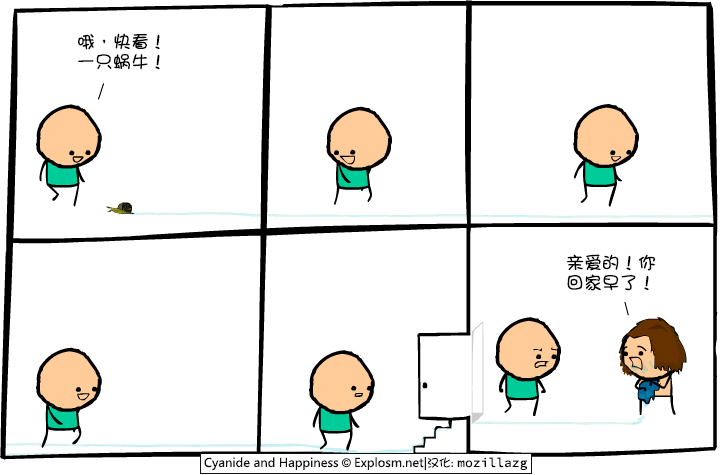
<style>
.page{position:relative;width:720px;height:475px;background:#ffffff}
.page>*{position:absolute;margin:0}
.t1{font:18px/20px "DFGirl";color:#000000}
</style>
<div class="page">
<p class="t1" style="left:78px;top:33px;width:82px;height:37px">哦，快看！<br>一只蜗牛！</p>
<p class="t1" style="left:566px;top:254px;width:90px;height:37px">亲爱的！你<br>回家早了！</p>
</div>
